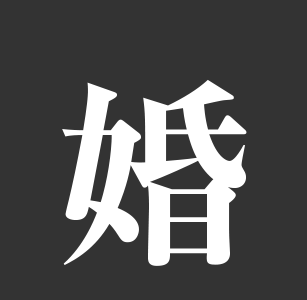
<style>
.page{position:relative;width:307px;height:300px;background:#333333}
.page>*{position:absolute;margin:0}
.t1{font:200px "RyuminPr6N-ExBold";color:#ffffff}
</style>
<div class="page">
<p class="t1" style="left:62px;top:79px;width:185px;height:187px">婚</p>
</div>
